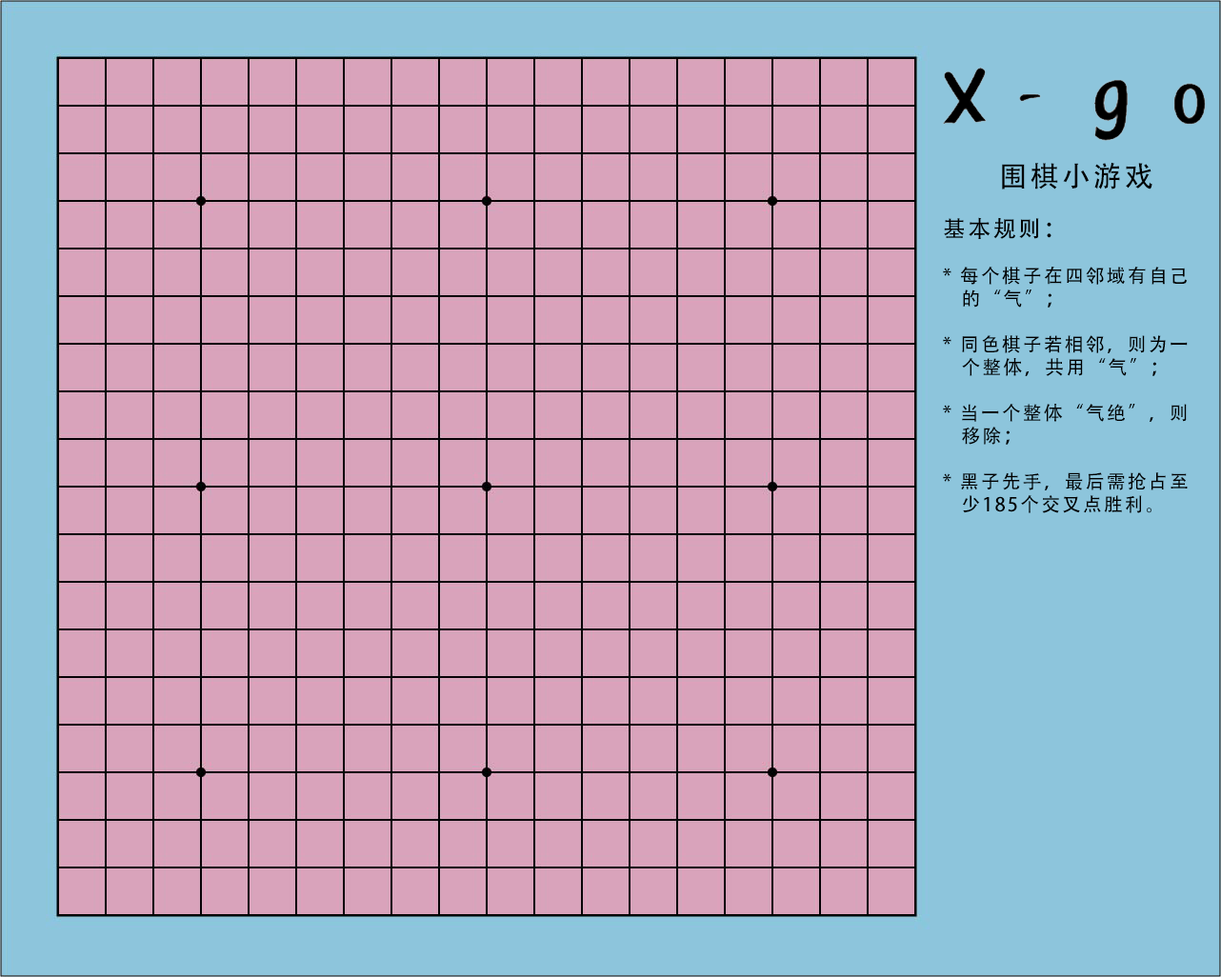
<style>
.page{position:relative;width:1221px;height:977px;background:#d9a3bb}
.page>*{position:absolute;margin:0}
.t1{font:28.6px "AdobeHeitiStd-Regular";letter-spacing:0.1em;color:#000000}
.t2{font:19px/22.9px "AdobeHeitiStd-Regular";letter-spacing:0.1em;color:#000000}
.t3{font:22.9px/22.9px "AdobeHeitiStd-Regular";letter-spacing:0.1em;color:#000000}
</style>
<div class="page">
<p class="t1" style="left:1002px;top:162px;width:150px;height:27px">围棋小游戏</p>
<p class="t2" style="left:943px;top:217px;width:244px;height:296px"><span class="t3">基本规则：<br>    <br></span>* 每个棋子在四邻域有自己<br>   的“气”；<br><br>* 同色棋子若相邻，则为一<br>   个整体，共用“气”；<br><br>* 当一个整体“气绝”，则<br>   移除；<br><br>* 黑子先手，最后需抢占至<br>   少185个交叉点胜利。</p>
</div>
